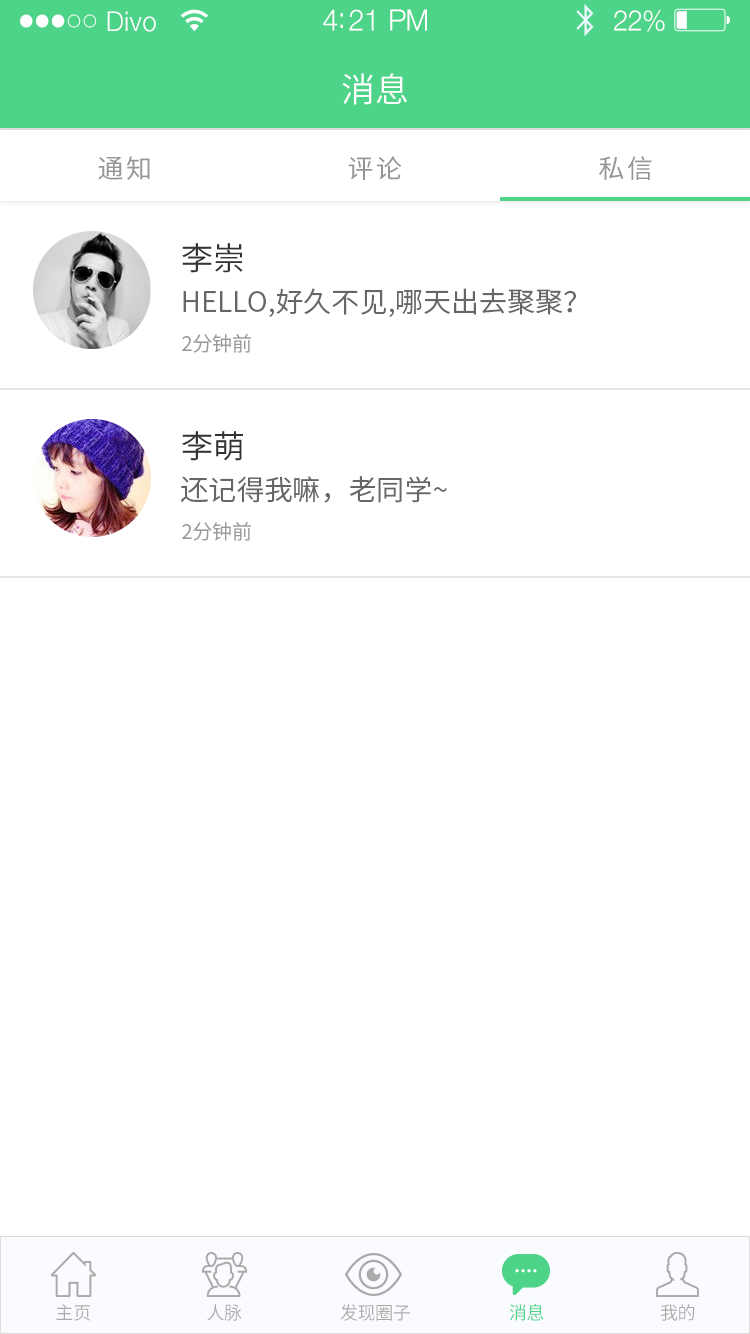
<style>
.page{position:relative;width:750px;height:1334px;background:#ffffff}
.page>*{position:absolute;margin:0}
.t1{font:27.3px "HelveticaNeue-Light";letter-spacing:0.02em;color:#ffffff;scale:0.96 1}
.t2{font:29.6px "HelveticaNeue-Light";letter-spacing:-0.02em;color:#ffffff;scale:0.96 1}
.t3{font:28.4px "HelveticaNeue-Light";letter-spacing:-0.02em;color:#ffffff;scale:0.96 1}
.t4{font:34px "SourceHanSansCN-Normal";letter-spacing:0.02em;color:#ffffff}
.t5{font:26px "SourceHanSansCN-Regular";letter-spacing:0.1em;color:#959595}
.t6{font:32px "SourceHanSansCN-Normal";color:#333333}
.t7{font:28px "SourceHanSansCN-Normal";color:#666666}
.t8{font:20px "SourceHanSansCN-Normal";color:#999999}
.t9{font:18px "SourceHanSansCN-Normal";color:#aaaaaa}
.t10{font:18px "SourceHanSansCN-Normal";color:#4dd489}
</style>
<div class="page">
<p class="t1" style="left:107px;top:11px;width:49px;height:21px">Divo</p>
<p class="t2" style="left:323px;top:9px;width:104px;height:22px">4:21 PM</p>
<p class="t3" style="left:614px;top:9px;width:51px;height:23px">22%</p>
<p class="t4" style="left:342px;top:73px;width:65px;height:32px">消息</p>
<p class="t5" style="left:98px;top:156px;width:52px;height:24px">通知</p>
<p class="t5" style="left:348px;top:156px;width:54px;height:24px">评论</p>
<p class="t5" style="left:599px;top:156px;width:53px;height:24px">私信</p>
<p class="t6" style="left:182px;top:243px;width:61px;height:30px">李崇</p>
<p class="t7" style="left:183px;top:288px;width:393px;height:29px">HELLO,好久不见,哪天出去聚聚？</p>
<p class="t8" style="left:182px;top:334px;width:69px;height:19px">2分钟前</p>
<p class="t6" style="left:182px;top:431px;width:61px;height:30px">李萌</p>
<p class="t7" style="left:180px;top:476px;width:267px;height:27px">还记得我嘛，老同学~</p>
<p class="t8" style="left:182px;top:522px;width:69px;height:19px">2分钟前</p>
<p class="t9" style="left:56px;top:1304px;width:34px;height:17px">主页</p>
<p class="t9" style="left:207px;top:1304px;width:35px;height:17px">人脉</p>
<p class="t9" style="left:340px;top:1304px;width:70px;height:17px">发现圈子</p>
<p class="t10" style="left:509px;top:1303px;width:35px;height:18px">消息</p>
<p class="t9" style="left:660px;top:1304px;width:35px;height:17px">我的</p>
</div>
